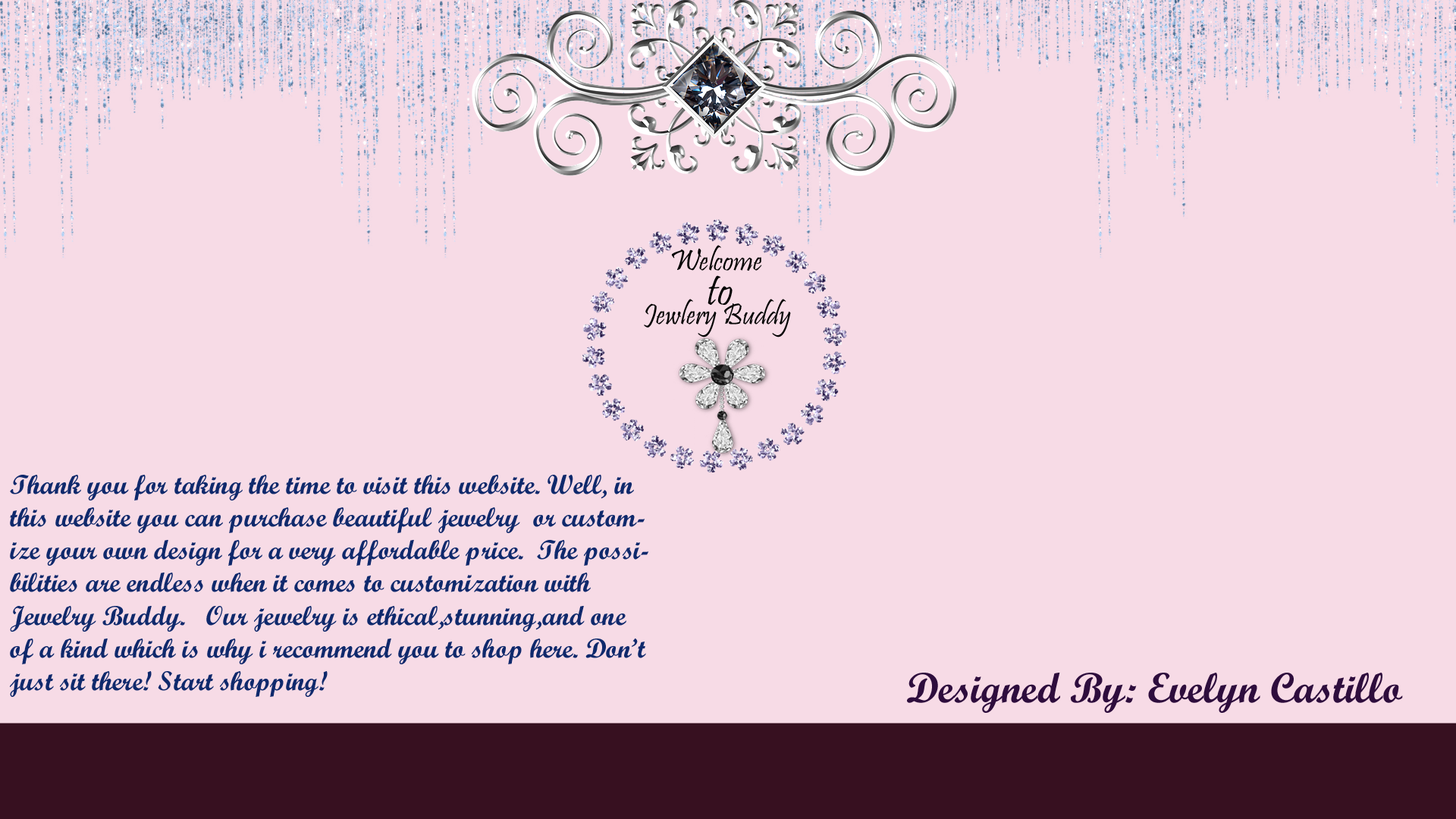
<style>
.page{position:relative;width:1456px;height:819px;background:#f7dbe6}
.page>*{position:absolute;margin:0}
.t1{font:30.3px "Pristina-Regular";color:#000000}
.t2{font:28.8px "ScriptMTBold";color:#000000}
.t3{font:44px "Pristina-Regular";color:#000000}
.t4{font:30.3px "Pristina-Regular";color:#030303}
.t5{font:27.3px "ScriptMTBold";color:#0f296c}
.t6{font:42.5px "ScriptMTBold";color:#2e0d3d}
.t7{font:47.1px "ScriptMTBold";color:#371020}
</style>
<div class="page">
<p class="t1" style="left:671px;top:245px;width:91px;height:26px"><span class="t2">     </span>Welcome</p>
<p class="t3" style="left:708px;top:275px;width:25px;height:30px">to</p>
<p class="t4" style="left:644px;top:299px;width:147px;height:38px"><span class="t1"> </span>Jewlery Buddy</p>
<p class="t5" style="left:10px;top:475px;width:638px;height:222px">Thank you for taking the time to visit this website. Well, in this website you can purchase beautiful jewelry  or customize your own design for a very affordable price.  The possibilities are endless when it comes to customization with Jewelry Buddy.   Our jewelry is ethical,stunning,and one of a kind which is why i recommend you to shop here. Don’t just sit there! Start shopping!</p>
<p class="t6" style="left:907px;top:673px;width:496px;height:40px"><span class="t7">   </span>Designed By: Evelyn Castillo</p>
</div>
